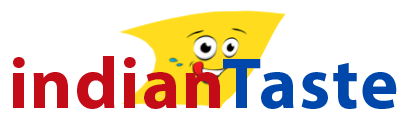
<style>
.page{position:relative;width:400px;height:117px;background:#ffffff}
.page>*{position:absolute;margin:0}
.t1{font:72.6px "MyriadPro-Bold";letter-spacing:0.025em;color:#c40c19}
.t2{font:72.6px "MyriadPro-Bold";letter-spacing:0.025em;color:#0047ab}
</style>
<div class="page">
<p class="t1" style="left:13px;top:56px;width:384px;height:53px">indian<span class="t2">Taste</span></p>
</div>
